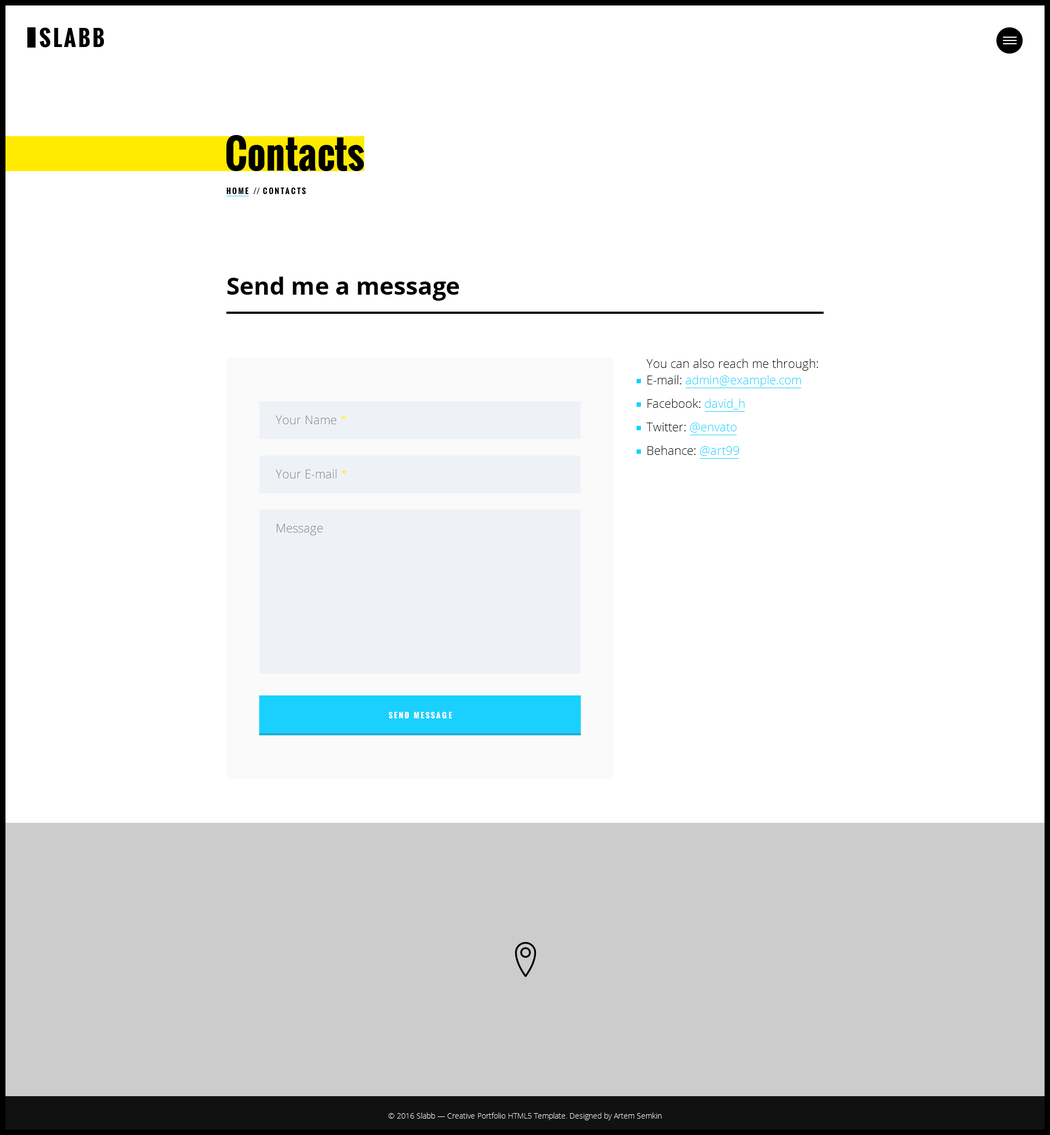
<style>
.page{position:relative;width:1050px;height:1135px;background:#ffffff}
.page>*{position:absolute;margin:0}
.t1{font:39.4px "Oswald-Bold";color:#000000}
.t2{font:7.7px "Oswald-Bold";letter-spacing:0.2em;color:#000000;text-transform:uppercase}
.t3{font:7.7px "Oswald-Bold";color:#000000;text-transform:uppercase}
.t4{font:24.1px "OpenSans-Bold";color:#000000}
.t5{font:12px "OpenSans-Light";color:#000000}
.t6{font:12px "OpenSans-Light";color:#19d0ff}
.t7{font:12px "OpenSans-Light";color:#888888}
.t8{font:12px "OpenSans-Light";color:#ffea00}
.t9{font:7.7px "Oswald-Bold";letter-spacing:0.2em;color:#ffffff;text-transform:uppercase}
</style>
<div class="page">
<p class="t1" style="left:226px;top:135px;width:138px;height:36px">Contacts</p>
<p class="t2" style="left:226px;top:188px;width:80px;height:6px">Home <span class="t3">//</span> Contacts</p>
<p class="t4" style="left:228px;top:277px;width:231px;height:24px">Send me a message</p>
<p class="t5" style="left:647px;top:359px;width:171px;height:12px">You can also reach me through:</p>
<p class="t6" style="left:648px;top:375px;width:153px;height:12px"><span class="t5">E-mail: </span>admin@example.com</p>
<p class="t5" style="left:648px;top:399px;width:97px;height:11px">Facebook: <span class="t6">david_h</span></p>
<p class="t7" style="left:276px;top:415px;width:70px;height:9px">Your Name <span class="t8">*</span></p>
<p class="t5" style="left:647px;top:423px;width:90px;height:10px">Twitter: <span class="t6">@envato</span></p>
<p class="t5" style="left:648px;top:446px;width:91px;height:10px">Behance: <span class="t6">@art99</span></p>
<p class="t7" style="left:276px;top:469px;width:71px;height:10px">Your E-mail <span class="t8">*</span></p>
<p class="t7" style="left:277px;top:524px;width:46px;height:11px">Message</p>
<p class="t9" style="left:389px;top:712px;width:63px;height:7px">Send message</p>
</div>
